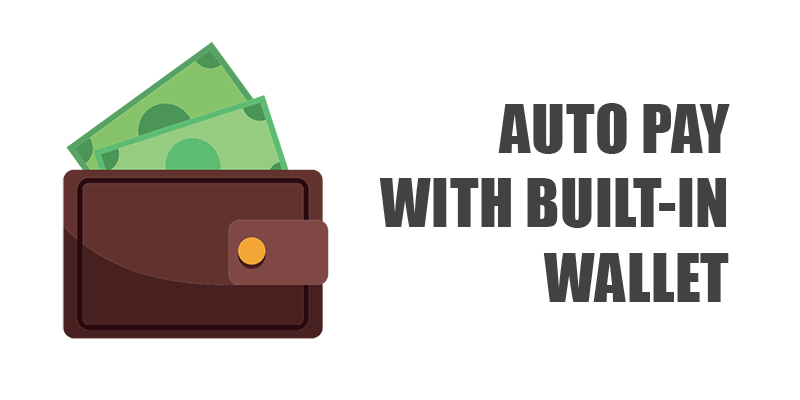
<style>
.page{position:relative;width:800px;height:400px;background:#ffffff}
.page>*{position:absolute;margin:0}
.t1{font:62px "Impact";letter-spacing:0.01em;color:#424242}
</style>
<div class="page">
<p class="t1" style="left:379px;top:103px;width:351px;height:199px;text-align:right">AUTO PAY <br>WITH BUILT-IN WALLET</p>
</div>
